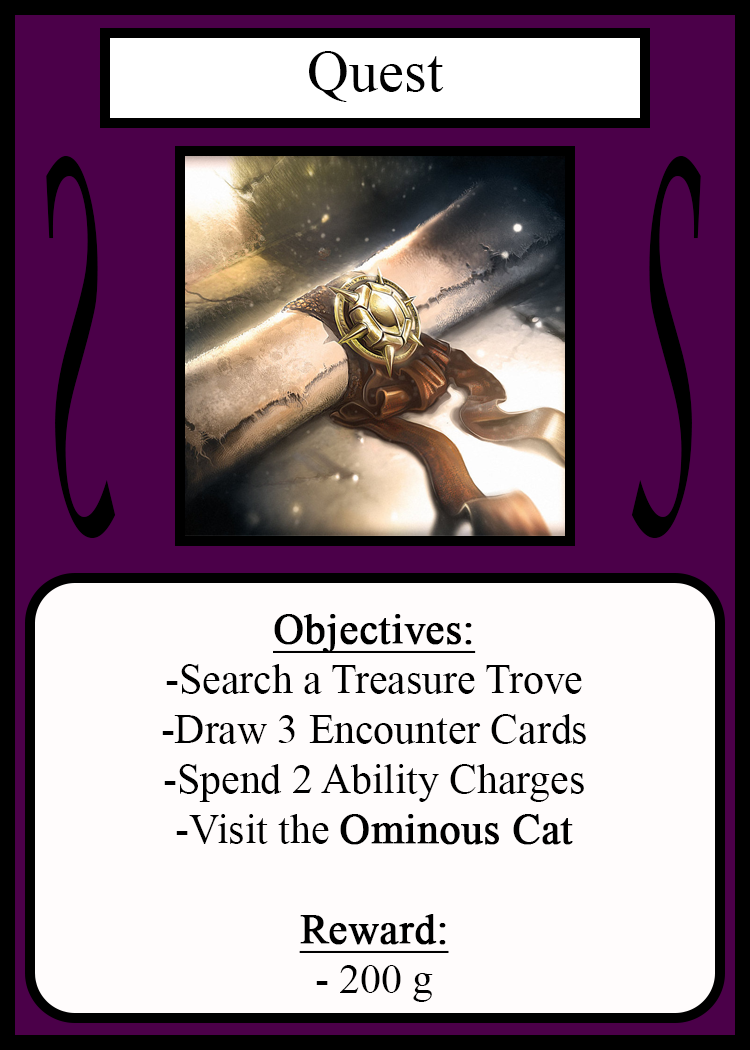
<style>
.page{position:relative;width:750px;height:1050px;background:#fffcfc}
.page>*{position:absolute;margin:0}
.t1{font:58.3px "TimesNewRomanPSMT";color:#010101}
.t2{font:504.3px "LucidaCalligraphy-Italic";color:#000000;scale:0.24 1}
.t3{font:504.1px "LucidaCalligraphy-Italic";color:#000000;scale:0.24 1}
.t4{font:41.7px "TimesNewRomanPSMT";color:#000000}
.t5{font:41.7px "TimesNewRomanPSMT";color:#000000;font-weight:bold;text-decoration:underline}
.t6{font:41.7px "TimesNewRomanPSMT";color:#000000;font-weight:bold}
</style>
<div class="page">
<p class="t1" style="left:309px;top:51px;width:135px;height:51px">Quest</p>
<p class="t2" style="left:46px;top:156px;width:70px;height:382px;rotate:180deg">S</p>
<p class="t3" style="left:631px;top:156px;width:70px;height:382px">S</p>
<p class="t4" style="left:162px;top:614px;width:424px;height:388px;text-align:center"><span class="t5">Objectives:<br></span>-Search a Treasure Trove<br>-Draw 3 Encounter Cards<br>-Spend 2 Ability Charges<br>-Visit the <span class="t6">Ominous Cat<br><br></span><span class="t5">Reward:</span><br>- 200 g</p>
</div>
